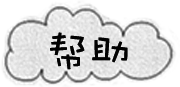
<style>
.page{position:relative;width:180px;height:87px;background:#ffffff}
.page>*{position:absolute;margin:0}
.t1{font:44.4px "DFPWaWaW5";letter-spacing:-0.025em;color:#020202}
</style>
<div class="page">
<p class="t1" style="left:50px;top:32px;width:78px;height:38px">帮助</p>
</div>
